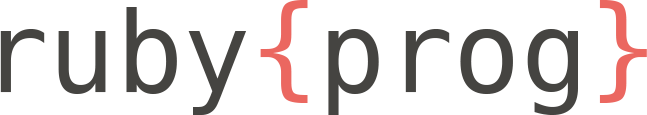
<style>
.page{position:relative;width:647px;height:115px;background:#ffffff}
.page>*{position:absolute;margin:0}
.t1{font:112.2px "Menlo-Regular";color:#454441}
.t2{font:112.2px "Menlo-Regular";color:#eb6760}
</style>
<div class="page">
<p class="t1" style="left:0px;top:0px;width:647px;height:115px">ruby<span class="t2">{</span>prog<span class="t2">}</span></p>
</div>
